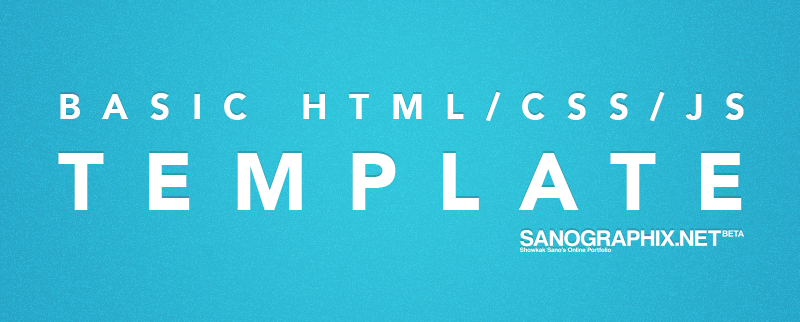
<style>
.page{position:relative;width:800px;height:322px}
.page>*{position:absolute;margin:0}
.t1{font:35.7px/91px "Avenir-Black";letter-spacing:0.6em;color:#ffffff}
.t2{font:80.6px/91px "Avenir-Black";letter-spacing:0.49em;color:#ffffff}
</style>
<div class="page">
<p class="t1" style="left:58px;top:91px;width:686px;height:119px;text-align:center">BASIC HTML/CSS/JS<br><span class="t2">TEMPLATE</span></p>
</div>
